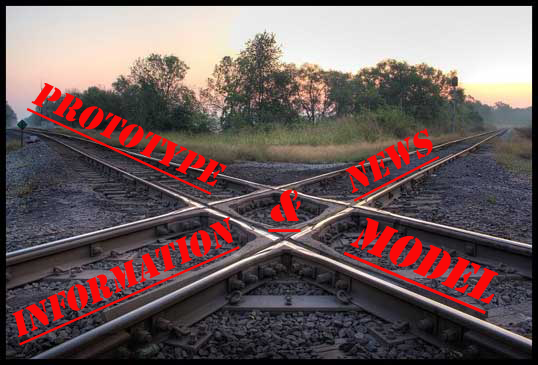
<style>
.page{position:relative;width:538px;height:365px}
.page>*{position:absolute;margin:0}
.t1{font:36px "Stencil";color:#fa0909;font-style:italic;text-decoration:underline}
.t2{font:46px "Stencil";color:#fa0909;font-style:italic;text-decoration:underline}
.t3{font:48px "Stencil";color:#fa0909;font-style:italic;text-decoration:underline}
</style>
<div class="page">
<p class="t1" style="left:26px;top:83px;width:201px;height:112px;rotate:25deg">Prototype</p>
<p class="t1" style="left:345px;top:128px;width:95px;height:74px;rotate:-27deg">News</p>
<p class="t2" style="left:268px;top:189px;width:33px;height:43px">&amp;</p>
<p class="t1" style="left:12px;top:217px;width:228px;height:129px;rotate:-24deg">Information</p>
<p class="t3" style="left:343px;top:217px;width:156px;height:98px;rotate:23deg">Model</p>
</div>
